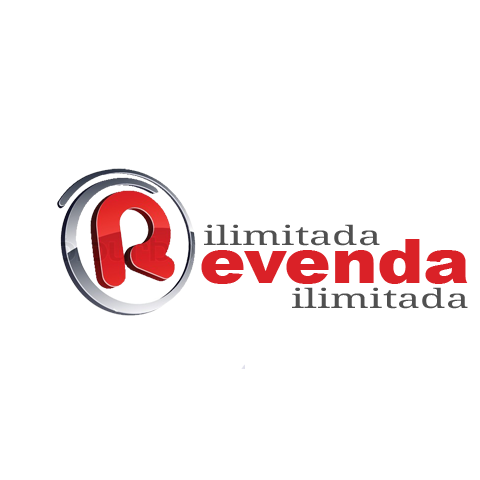
<style>
.page{position:relative;width:480px;height:480px;background:#ffffff}
.page>*{position:absolute;margin:0}
.t1{font:26.6px "DroidSerif";color:#505050;scale:1.55 1}
.t2{font:61.3px "Arial-Black";color:#da2127;scale:1.13 1}
</style>
<div class="page">
<p class="t1" style="left:204px;top:224px;width:176px;height:22px">ilimitada</p>
<p class="t2" style="left:201px;top:239px;width:267px;height:45px">evenda</p>
<p class="t1" style="left:292px;top:287px;width:176px;height:22px">ilimitada</p>
</div>
